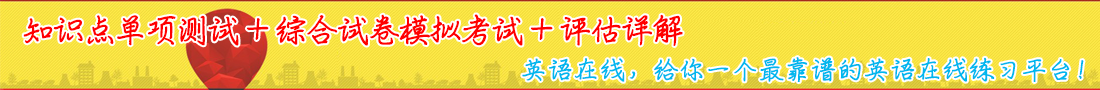
<style>
.page{position:relative;width:1100px;height:90px}
.page>*{position:absolute;margin:0}
.t1{font:32px "PensinkaiEG-Bold-GB";letter-spacing:-0.06em;color:#ff0000;font-weight:bold}
.t2{font:25.3px "PensinkaiEG-Bold-GB";color:#00b7ee;font-weight:bold}
</style>
<div class="page">
<p class="t1" style="left:23px;top:14px;width:660px;height:32px">知识点单项测试 + 综合试卷模拟考试 + 评估详解</p>
<p class="t2" style="left:522px;top:57px;width:562px;height:25px">英语在线，给你一个最靠谱的英语在线练习平台！</p>
</div>
